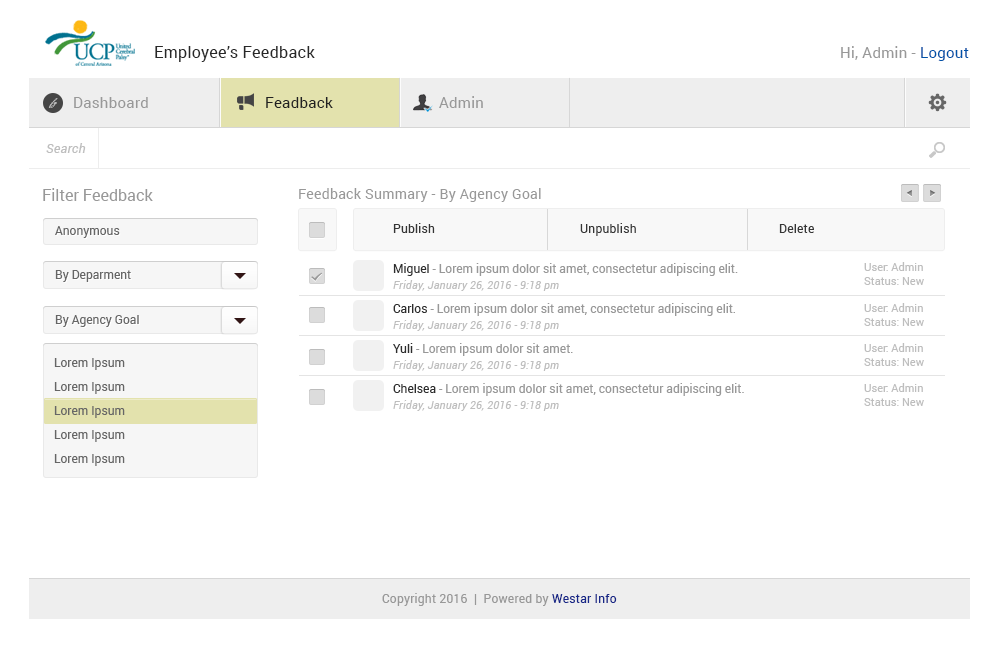
<style>
.page{position:relative;width:1000px;height:664px;background:#ffffff}
.page>*{position:absolute;margin:0}
.t1{font:16px "Roboto-Regular";letter-spacing:0.02em;color:#282828}
.t2{font:15px "Roboto-Regular";letter-spacing:0.02em;color:#989898}
.t3{font:15px "Roboto-Regular";letter-spacing:0.02em;color:#0053a8}
.t4{font:10px "BickhamScriptPro-Regular";letter-spacing:0.02em;color:#bababa}
.t5{font:15px "Roboto-Regular";letter-spacing:0.02em;color:#212121}
.t6{font:13px "Roboto-Italic";letter-spacing:0.02em;color:#bebebe}
.t7{font:16px "Roboto-Regular";color:#989898}
.t8{font:14px "Roboto-Regular";letter-spacing:0.02em;color:#989898}
.t9{font:12px "Roboto-Regular";color:#666666}
.t10{font:12px "Roboto-Regular";letter-spacing:0.02em;color:#353535}
.t11{font:12px "Roboto-Regular";color:#989898}
.t12{font:12px "Roboto-Regular";color:#2d2d2d}
.t13{font:11px/14px "Roboto-Regular";color:#bebebe}
.t14{font:11px "Roboto-Italic";letter-spacing:0.02em;color:#bebebe}
.t15{font:12px/24px "Roboto-Regular";color:#666666}
.t16{font:12px "Roboto-Regular";letter-spacing:0.02em;color:#989898}
.t17{font:12px "Roboto-Regular";letter-spacing:0.02em;color:#172788}
</style>
<div class="page">
<p class="t1" style="left:155px;top:46px;width:160px;height:16px">Employee’s Feedback</p>
<p class="t2" style="left:841px;top:46px;width:128px;height:15px">Hi, Admin - <span class="t3">Logout</span></p>
<p class="t4" style="left:48px;top:98px;width:10px;height:10px">fg</p>
<p class="t2" style="left:74px;top:97px;width:74px;height:11px">Dashboard</p>
<p class="t5" style="left:266px;top:97px;width:67px;height:11px">Feadback</p>
<p class="t2" style="left:439px;top:96px;width:44px;height:12px">Admin</p>
<p class="t6" style="left:46px;top:143px;width:40px;height:10px">Search</p>
<p class="t7" style="left:43px;top:188px;width:110px;height:13px">Filter Feedback</p>
<p class="t8" style="left:299px;top:188px;width:242px;height:14px">Feedback Summary - By Agency Goal</p>
<p class="t9" style="left:55px;top:226px;width:65px;height:12px">Anonymous</p>
<p class="t10" style="left:393px;top:223px;width:42px;height:10px">Publish</p>
<p class="t10" style="left:580px;top:223px;width:56px;height:13px">Unpublish</p>
<p class="t10" style="left:779px;top:224px;width:35px;height:9px">Delete</p>
<p class="t9" style="left:55px;top:270px;width:76px;height:12px">By Deparment</p>
<p class="t11" style="left:393px;top:263px;width:345px;height:13px"><span class="t12">Miguel </span>- Lorem ipsum dolor sit amet, consectetur adipiscing elit.</p>
<p class="t13" style="left:864px;top:262px;width:60px;height:23px">User: Admin<br>Status: New</p>
<p class="t14" style="left:393px;top:280px;width:166px;height:11px">Friday, January 26, 2016 - 9:18 pm</p>
<p class="t11" style="left:393px;top:303px;width:342px;height:13px"><span class="t12">Carlos </span>- Lorem ipsum dolor sit amet, consectetur adipiscing elit.</p>
<p class="t13" style="left:864px;top:303px;width:60px;height:23px">User: Admin<br>Status: New</p>
<p class="t9" style="left:55px;top:315px;width:84px;height:12px">By Agency Goal</p>
<p class="t14" style="left:393px;top:320px;width:166px;height:11px">Friday, January 26, 2016 - 9:18 pm</p>
<p class="t11" style="left:393px;top:343px;width:180px;height:13px"><span class="t12">Yuli </span>- Lorem ipsum dolor sit amet.</p>
<p class="t13" style="left:864px;top:343px;width:60px;height:23px">User: Admin<br>Status: New</p>
<p class="t15" style="left:54px;top:358px;width:71px;height:108px">Lorem Ipsum<br>Lorem Ipsum<br>Lorem Ipsum<br>Lorem Ipsum<br>Lorem Ipsum</p>
<p class="t14" style="left:393px;top:360px;width:166px;height:11px">Friday, January 26, 2016 - 9:18 pm</p>
<p class="t11" style="left:393px;top:383px;width:351px;height:13px"><span class="t12">Chelsea </span>- Lorem ipsum dolor sit amet, consectetur adipiscing elit.</p>
<p class="t13" style="left:864px;top:383px;width:60px;height:23px">User: Admin<br>Status: New</p>
<p class="t14" style="left:393px;top:400px;width:166px;height:11px">Friday, January 26, 2016 - 9:18 pm</p>
<p class="t16" style="left:382px;top:593px;width:235px;height:13px">Copyright 2016  |  Powered by <span class="t17">Westar Info</span></p>
</div>
